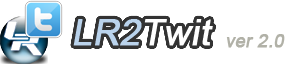
<style>
.page{position:relative;width:300px;height:64px;background:#ffffff}
.page>*{position:absolute;margin:0}
.t1{font:36px "ArialMT";color:#ffffff;font-weight:bold;font-style:italic}
.t2{font:36px "ArialMT";color:#bad3ec;font-weight:bold;font-style:italic}
.t3{font:18px "ArialMT";color:#b1b1a7;font-weight:bold;font-style:italic}
</style>
<div class="page">
<p class="t1" style="left:73px;top:19px;width:140px;height:27px"><span class="t2">LR2</span>Twit</p>
<p class="t3" style="left:226px;top:34px;width:59px;height:14px">ver 2.0</p>
</div>
